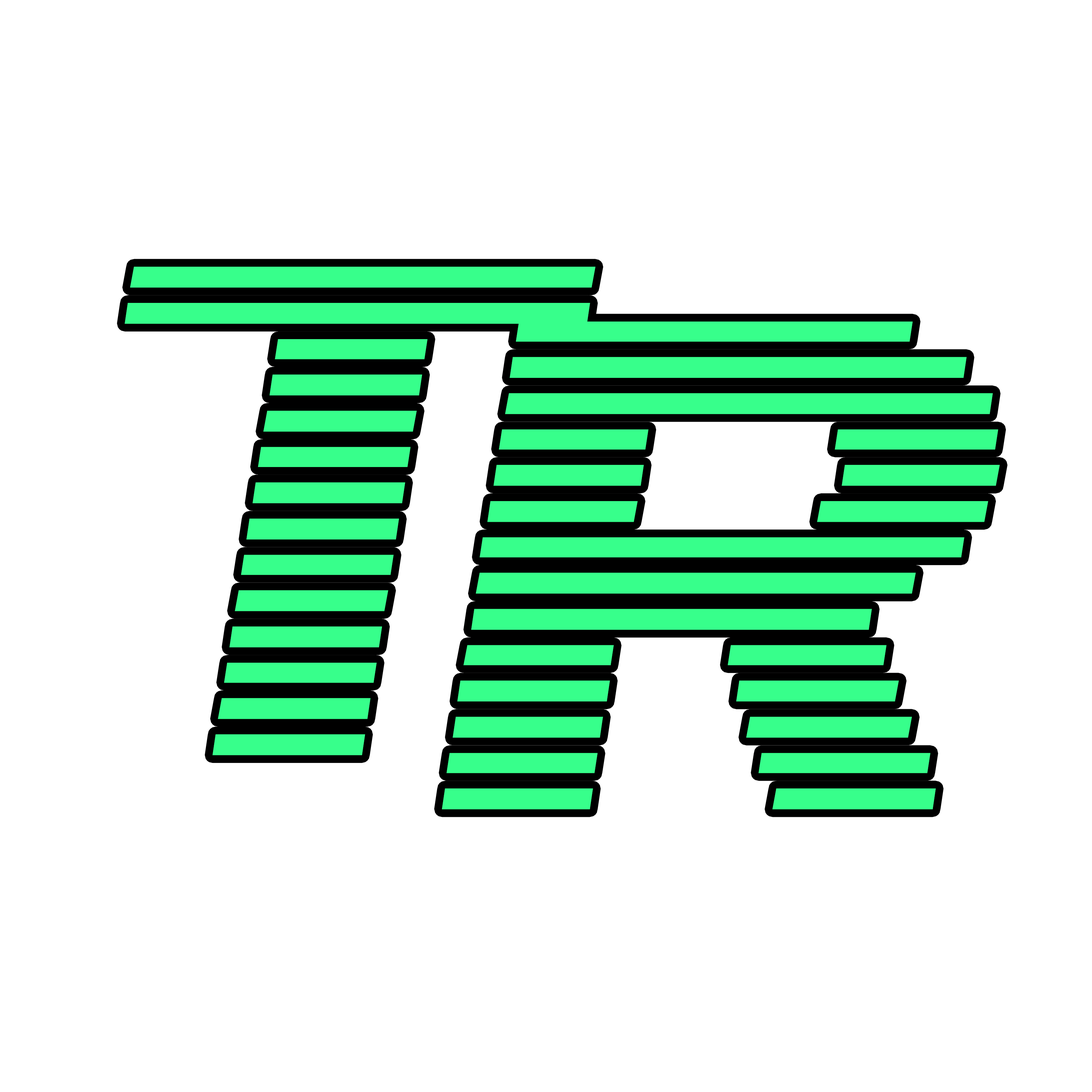
<style>
.page{position:relative;width:1092px;height:1092px;background:#ffffff}
.page>*{position:absolute;margin:0}
.t1{font:770.4px/55.5px "LinearBeam05";color:#37ff8b}
</style>
<div class="page">
<p class="t1" style="left:125px;top:267px;width:875px;height:542px;text-align:center">T  <br>  R</p>
</div>
